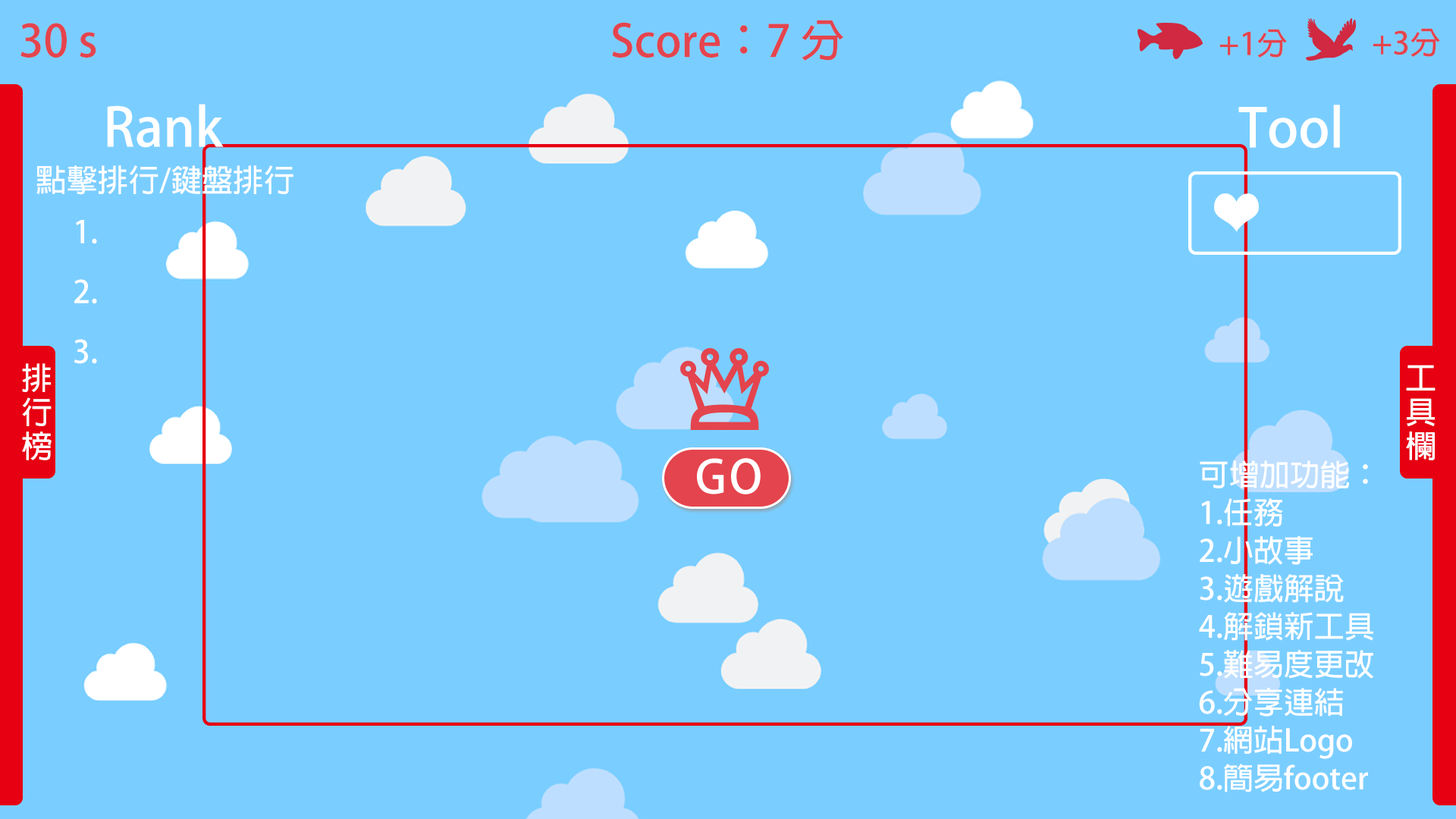
<style>
.page{position:relative;width:1456px;height:819px;background:#7aceff}
.page>*{position:absolute;margin:0}
.t1{font:75.8px "AdobeFanHeitiStd-Bold";color:#e4444d}
.t2{font:53.1px "AdobeFanHeitiStd-Bold";color:#e4444d}
.t3{font:53.1px "AdobeFanHeitiStd-Bold";color:#ffffff}
.t4{font:53.1px/59.9px "AdobeFanHeitiStd-Bold";color:#ffffff}
.t5{font:52.9px/34px "AdobeFanHeitiStd-Bold";color:#ffffff}
.t6{font:30.3px/37.9px "AdobeFanHeitiStd-Bold";color:#ffffff}
</style>
<div class="page">
<p class="t1" style="left:20px;top:23px;width:76px;height:35px">30 s</p>
<p class="t1" style="left:612px;top:20px;width:232px;height:41px">Score：7 分</p>
<p class="t2" style="left:1219px;top:29px;width:68px;height:29px">+1分</p>
<p class="t2" style="left:1373px;top:28px;width:67px;height:29px">+3分</p>
<p class="t3" style="left:107px;top:104px;width:117px;height:44px">Rank</p>
<p class="t3" style="left:1238px;top:105px;width:102px;height:44px">Tool</p>
<p class="t3" style="left:36px;top:165px;width:257px;height:30px">點擊排行/鍵盤排行</p>
<p class="t4" style="left:74px;top:220px;width:23px;height:144px;text-align:right">1.<br>2.<br>3.</p>
<p class="t5" style="left:22px;top:363px;width:30px;height:97px;text-align:right">排<br>行<br>榜</p>
<p class="t5" style="left:1406px;top:365px;width:30px;height:95px;text-align:right">工<br>具<br>欄</p>
<p class="t6" style="left:1199px;top:460px;width:175px;height:332px">可增加功能：<br>1.任務<br>2.小故事<br>3.遊戲解說<br>4.解鎖新工具<br>5.難易度更改<br>6.分享連結<br>7.網站Logo<br>8.簡易footer</p>
</div>
